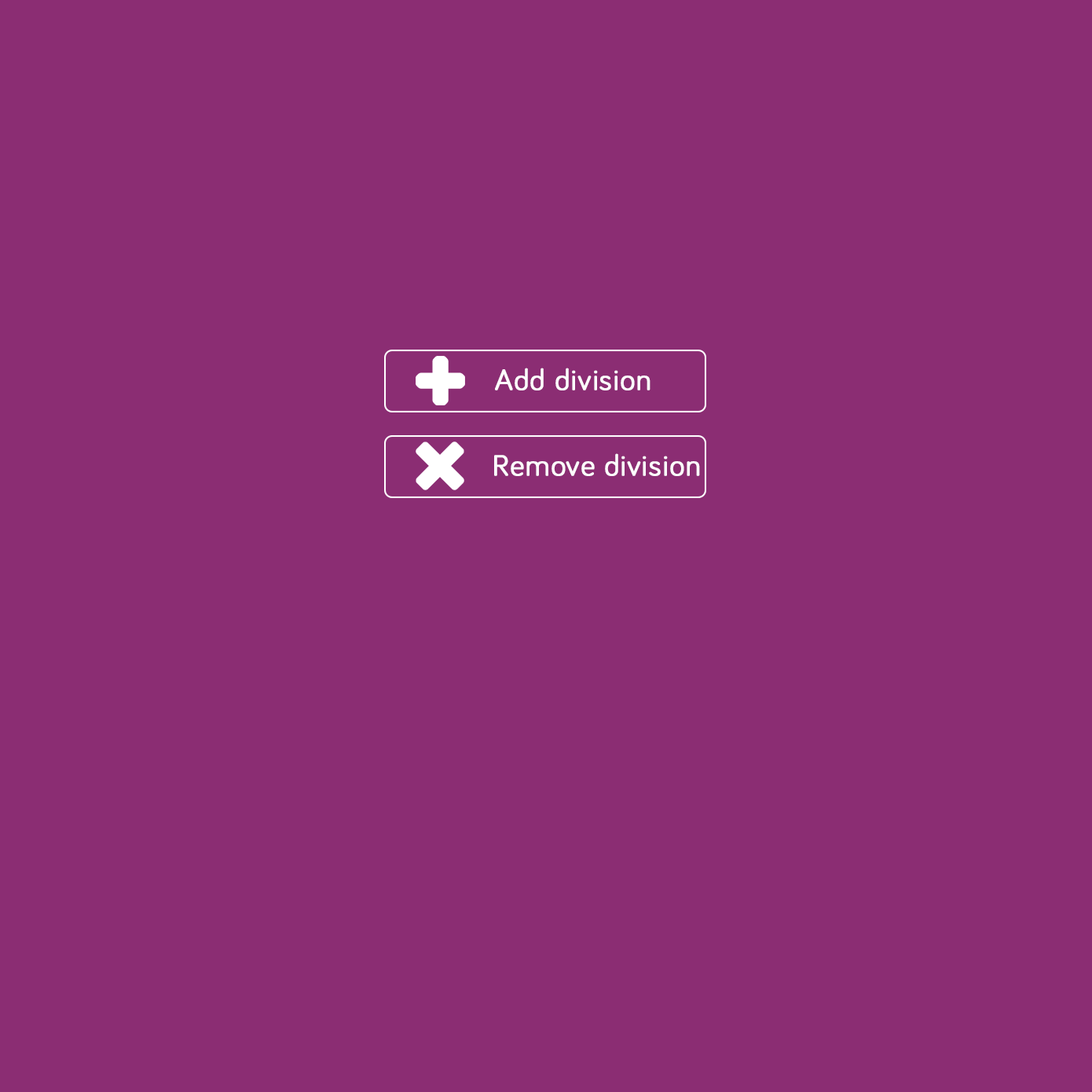
<style>
.page{position:relative;width:1092px;height:1092px;background:#8b2d73}
.page>*{position:absolute;margin:0}
.t1{font:30.1px "Bariol-Regular";letter-spacing:0.01em;color:#fefefe;font-weight:bold}
</style>
<div class="page">
<p class="t1" style="left:495px;top:368px;width:155px;height:22px">Add division</p>
<p class="t1" style="left:494px;top:453px;width:206px;height:23px">Remove division</p>
</div>
